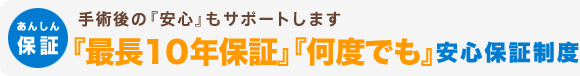
<style>
.page{position:relative;width:580px;height:76px;background:#f5f5f5}
.page>*{position:absolute;margin:0}
.t1{font:20px "HGPSoeiKakugothicUB";letter-spacing:0.2em;color:#ffffff;scale:0.95 1}
.t2{font:30px "HiraKakuStd-W8";color:#ff9900}
.t3{font:30px "HiraKakuStd-W5";color:#ff9900}
.t4{font:22px "HiraKakuStd-W8";letter-spacing:0.1em;color:#007bd0}
</style>
<div class="page">
<p class="t1" style="left:17px;top:35px;width:41px;height:19px">保証</p>
<p class="t2" style="left:74px;top:37px;width:358px;height:29px"><span class="t3">『</span>最長１０年保証<span class="t3">』『</span>何度でも<span class="t3">』</span></p>
<p class="t4" style="left:436px;top:41px;width:143px;height:22px">安心保証制度</p>
</div>
